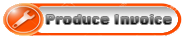
<style>
.page{position:relative;width:186px;height:38px;background:#ffffff}
.page>*{position:absolute;margin:0}
.t1{font:12px "Krungthep";scale:1.21 1}
</style>
<div class="page">
<p class="t1" style="left:46px;top:15px;width:125px;height:9px">Produce Invoice</p>
</div>
